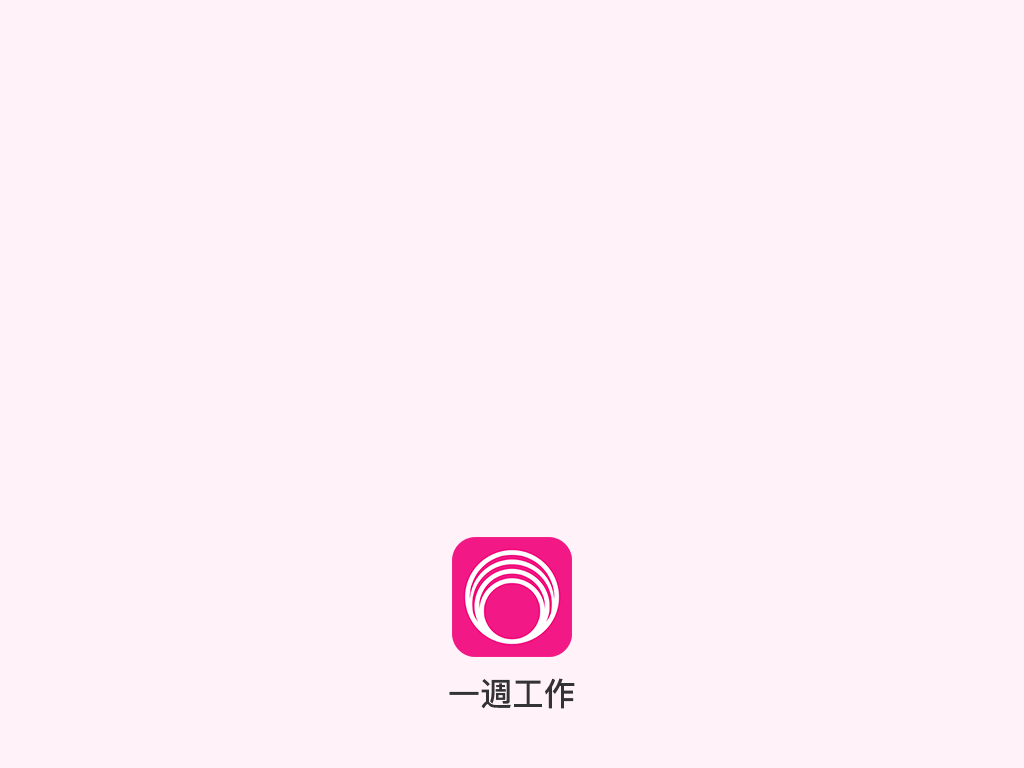
<style>
.page{position:relative;width:1024px;height:768px;background:#fff2f9}
.page>*{position:absolute;margin:0}
.t1{font:32px "PingFang-SC-Bold";color:#333333}
</style>
<div class="page">
<p class="t1" style="left:449px;top:678px;width:126px;height:31px">一週工作</p>
</div>
